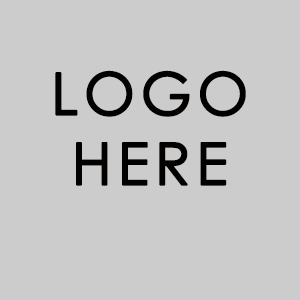
<style>
.page{position:relative;width:300px;height:300px;background:#cccccc}
.page>*{position:absolute;margin:0}
.t1{font:58.3px "CenturyGothic";letter-spacing:0.075em;color:#030000;font-weight:bold}
</style>
<div class="page">
<p class="t1" style="left:55px;top:70px;width:191px;height:116px;text-align:center">LOGO<br>HERE</p>
</div>
